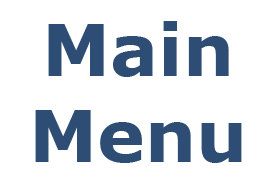
<style>
.page{position:relative;width:268px;height:190px;background:#ffffff}
.page>*{position:absolute;margin:0}
.t1{font:72px "Verdana-Bold";color:#2d4d74}
</style>
<div class="page">
<p class="t1" style="left:35px;top:21px;width:207px;height:142px;text-align:center">Main <br>Menu</p>
</div>
